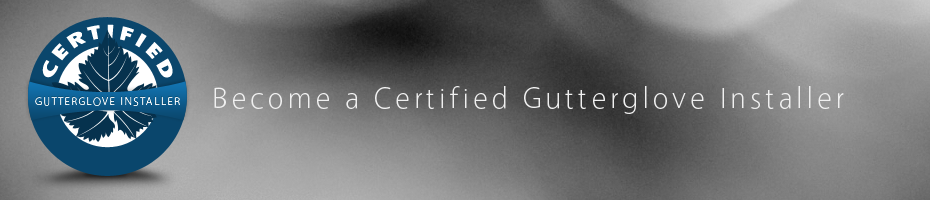
<style>
.page{position:relative;width:930px;height:200px}
.page>*{position:absolute;margin:0}
.t1{font:20.5px "TwCenMT-CondensedExtraBold";letter-spacing:0.13em;color:#ffffff}
.t2{font:30px "Vegur-Light";letter-spacing:0.13em;color:#f0f0f0}
.t3{font:11px "Vegur-Light";letter-spacing:0.13em}
.t4{font:11px "Vegur-Light";letter-spacing:0.13em;color:#ffffff}
</style>
<div class="page">
<p class="t1" style="left:42px;top:24px;width:131px;height:54px;rotate:3deg">CERTIFIED</p>
<p class="t2" style="left:214px;top:86px;width:630px;height:28px">Become a Certified Gutterglove Installer</p>
<p class="t3" style="left:35px;top:96px;width:145px;height:9px">GUTTERGLOVE INSTALLER</p>
<p class="t4" style="left:35px;top:97px;width:145px;height:9px">GUTTERGLOVE INSTALLER</p>
</div>
